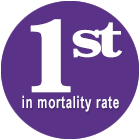
<style>
.page{position:relative;width:140px;height:140px;background:#5a3288}
.page>*{position:absolute;margin:0}
.t1{font:108px "Baskerville-Bold";letter-spacing:-0.1em;color:#ffffff;scale:1.09 1}
.t2{font:28.8px "ArialNarrow-Bold";letter-spacing:0.05em;color:#ffffff;scale:0.83 1}
</style>
<div class="page">
<p class="t1" style="left:30px;top:19px;width:92px;height:74px">1st</p>
<p class="t2" style="left:22px;top:95px;width:97px;height:17px">in mortality rate</p>
</div>
